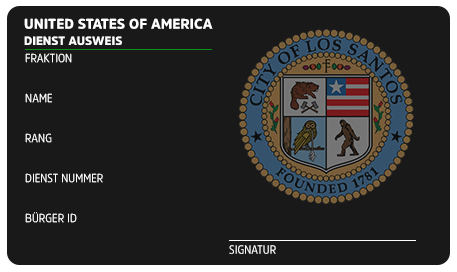
<style>
.page{position:relative;width:457px;height:272px;background:#191919}
.page>*{position:absolute;margin:0}
.t1{font:14px "AmsiPro-Black";color:#ffffff;text-transform:uppercase}
.t2{font:12px "AmsiPro-Black";color:#ffffff;text-transform:uppercase}
.t3{font:12px/40px "AmsiProNarw-Regular";color:#ffffff;text-transform:uppercase}
.t4{font:12px "AmsiProNarw-Regular";color:#ffffff;text-transform:uppercase}
</style>
<div class="page">
<p class="t1" style="left:24px;top:18px;width:189px;height:11px">United States of America</p>
<p class="t2" style="left:24px;top:36px;width:98px;height:10px">Dienst ausweis</p>
<p class="t3" style="left:25px;top:53px;width:78px;height:170px">Fraktion<br>Name<br>Rang<br>Dienst nummer<br>Bürger ID</p>
<p class="t4" style="left:229px;top:245px;width:47px;height:9px">Signature</p>
</div>
